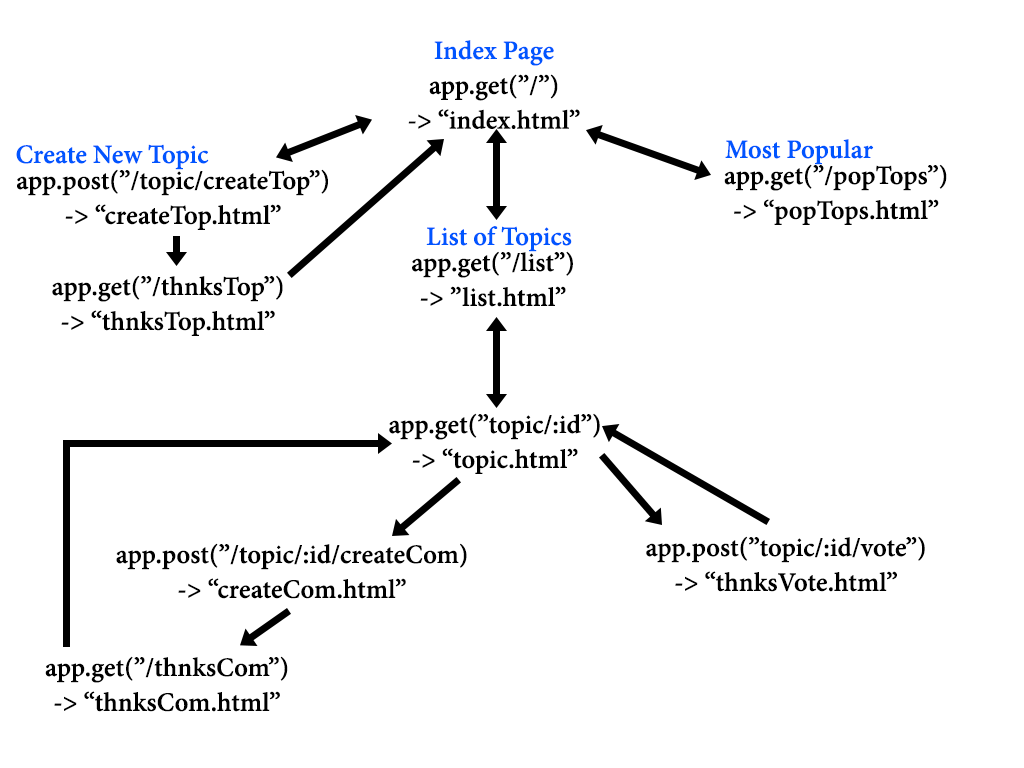
<style>
.page{position:relative;width:1024px;height:768px;background:#ffffff}
.page>*{position:absolute;margin:0}
.t1{font:29px "AdobeDevanagari-Bold";color:#000000}
.t2{font:29px "AdobeDevanagari-Bold";color:#0055ff}
</style>
<div class="page">
<p class="t1" style="left:408px;top:40px;width:172px;height:89px;text-align:center"><span class="t2">Index Page<br></span>app.get(”/”)<br>-&gt; “index.html”</p>
<p class="t2" style="left:16px;top:144px;width:193px;height:26px">Create New Topic</p>
<p class="t2" style="left:725px;top:139px;width:149px;height:26px">Most Popular</p>
<p class="t1" style="left:17px;top:169px;width:311px;height:61px;text-align:center">app.post(”/topic/createTop”)<br>-&gt; “createTop.html”</p>
<p class="t1" style="left:724px;top:164px;width:223px;height:61px;text-align:center">app.get(”/popTops”)<br>-&gt; “popTops.html”</p>
<p class="t2" style="left:426px;top:226px;width:146px;height:26px">List of Topics</p>
<p class="t1" style="left:412px;top:251px;width:161px;height:56px;text-align:center">app.get(”/list”)<br>-&gt; ”list.html”</p>
<p class="t1" style="left:52px;top:275px;width:231px;height:61px;text-align:center">app.get(”/thnksTop”)<br>-&gt; “thnksTop.html”</p>
<p class="t1" style="left:389px;top:413px;width:211px;height:61px;text-align:center">app.get(”topic/:id”)<br>-&gt; “topic.html”</p>
<p class="t1" style="left:116px;top:543px;width:351px;height:56px;text-align:center">app.post(”/topic/:id/createCom)<br>-&gt; “createCom.html”</p>
<p class="t1" style="left:646px;top:536px;width:279px;height:56px;text-align:center">app.post(”topic/:id/vote”)<br>-&gt; “thnksVote.html”</p>
<p class="t1" style="left:45px;top:656px;width:243px;height:56px;text-align:center">app.get(”/thnksCom”)<br>-&gt; “thnksCom.html”</p>
</div>
